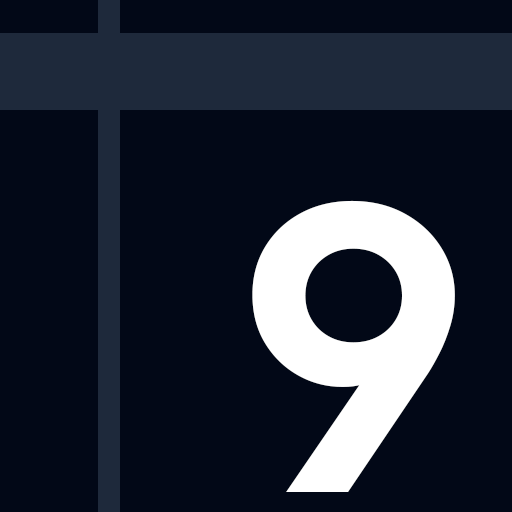
<style>
.page{position:relative;width:512px;height:512px;background:#020817}
.page>*{position:absolute;margin:0}
.t1{font:400px "RedditSans-Bold";color:#ffffff}
</style>
<div class="page">
<p class="t1" style="left:252px;top:200px;width:203px;height:292px">9</p>
</div>
